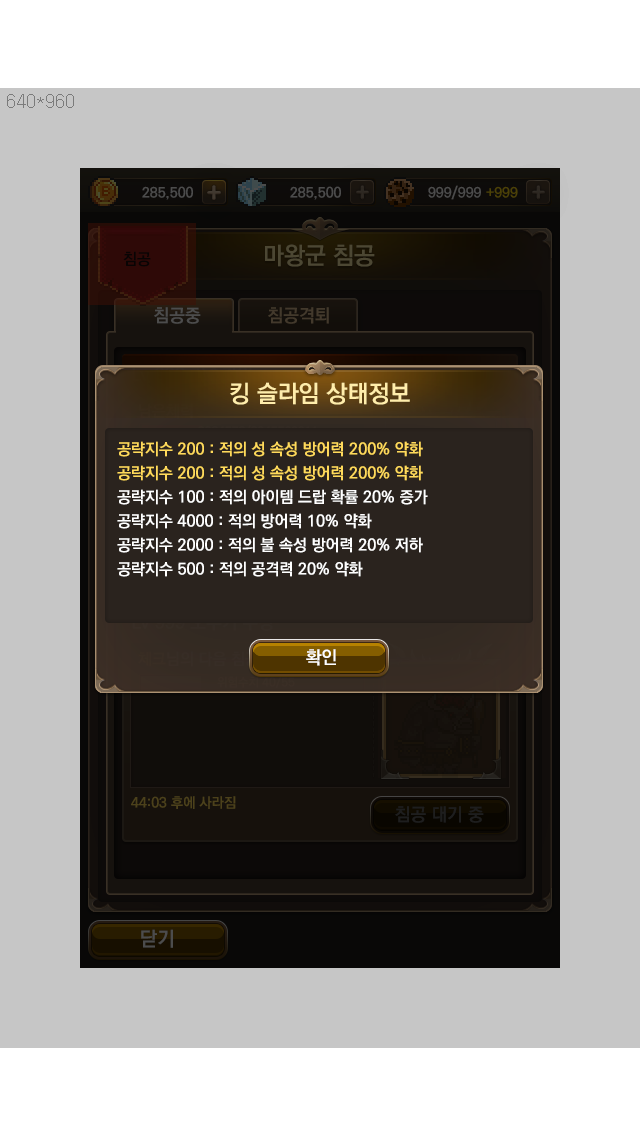
<style>
.page{position:relative;width:640px;height:1136px;background:#c6c6c6}
.page>*{position:absolute;margin:0}
.t1{font:24px "KoPubDotumBold";color:#ffedab}
.t2{font:16px/24px "KoPubDotumBold";color:#ffffff}
.t3{font:16px/24px "KoPubDotumBold";color:#ffda5b}
</style>
<div class="page">
<p class="t1" style="left:230px;top:382px;width:180px;height:23px">킹 슬라임 상태정보</p>
<p class="t2" style="left:117px;top:441px;width:311px;height:136px"><span class="t3">공략지수 200 : 적의 성 속성 방어력 200% 약화<br>공략지수 200 : 적의 성 속성 방어력 200% 약화<br></span>공략지수 100 : 적의 아이템 드랍 확률 20% 증가<br>공략지수 4000 : 적의 방어력 10% 약화<br>공략지수 2000 : 적의 불 속성 방어력 20% 저하<br>공략지수 500 : 적의 공격력 20% 약화</p>
</div>
